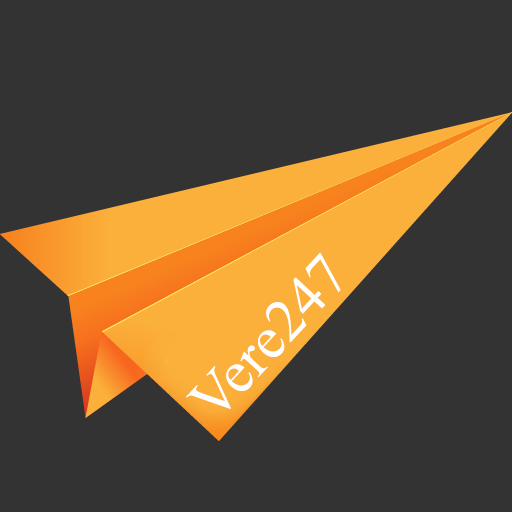
<style>
.page{position:relative;width:512px;height:512px;background:#333333}
.page>*{position:absolute;margin:0}
.t1{font:60px "TimesNewRomanPSMT";color:#ffffff}
</style>
<div class="page">
<p class="t1" style="left:186px;top:252px;width:155px;height:157px;rotate:-47deg">Vere247</p>
</div>
